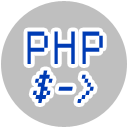
<style>
.page{position:relative;width:128px;height:128px;background:#bfbfbf}
.page>*{position:absolute;margin:0}
.t1{font:43.2px "Small Fonts";letter-spacing:0.1em;color:#003cb5}
.t2{font:43.2px "Small Fonts";letter-spacing:0.1em;color:#003cb5;font-style:italic}
</style>
<div class="page">
<p class="t1" style="left:27px;top:31px;width:76px;height:33px">PHP</p>
<p class="t2" style="left:32px;top:70px;width:62px;height:33px">$-&gt;</p>
</div>
